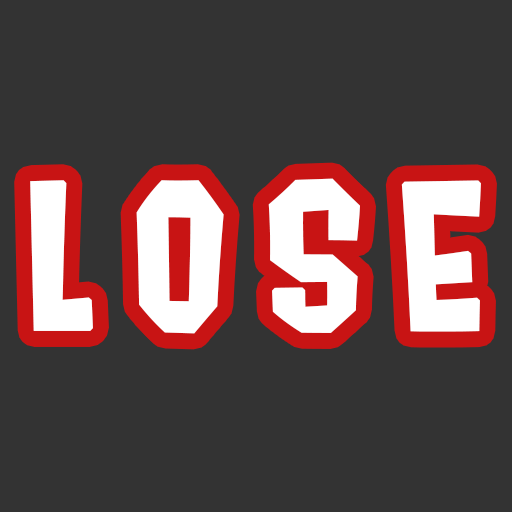
<style>
.page{position:relative;width:512px;height:512px;background:#333333}
.page>*{position:absolute;margin:0}
.t1{font:200px "Splat2K";letter-spacing:0.155em;color:#ffffff;font-weight:bold}
</style>
<div class="page">
<p class="t1" style="left:30px;top:178px;width:451px;height:156px">LOSE</p>
</div>
